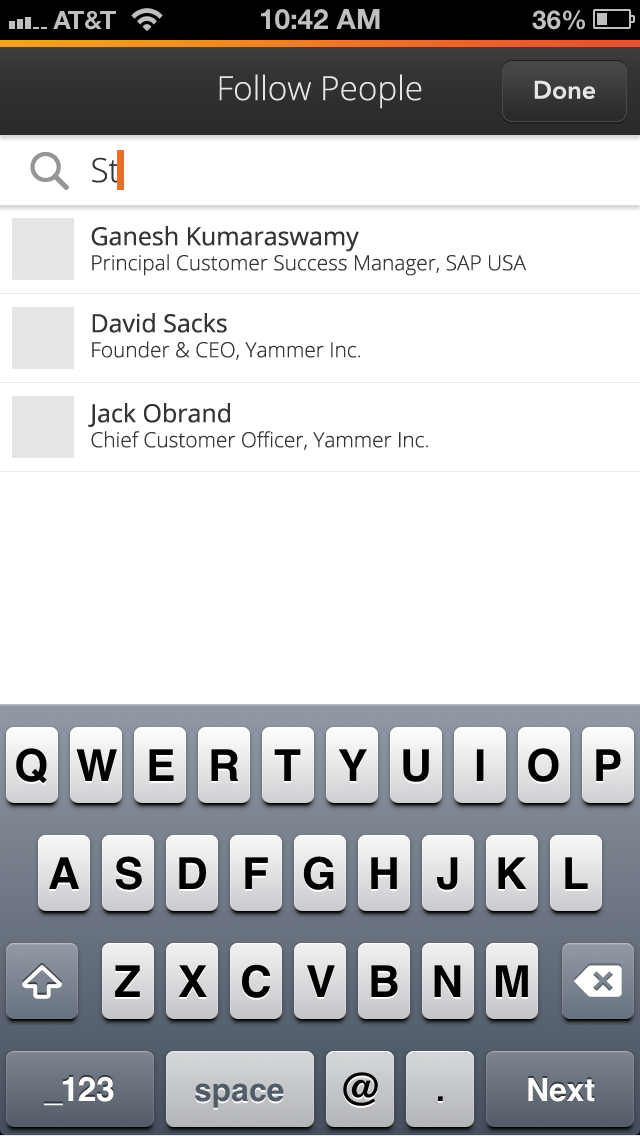
<style>
.page{position:relative;width:640px;height:1136px;background:#ffffff}
.page>*{position:absolute;margin:0}
.t1{font:33.3px "OpenSans-Light";color:#e5e5e5}
.t2{font:25px "AvenirNext-DemiBold";color:#e5e5e5}
.t3{font:33.3px "OpenSans-Light";color:#343434}
.t4{font:20.8px "OpenSans-Light";color:#343434}
.t5{font:25px "OpenSans";color:#343434}
</style>
<div class="page">
<p class="t1" style="left:219px;top:74px;width:203px;height:35px">Follow People</p>
<p class="t2" style="left:534px;top:80px;width:61px;height:19px">Done</p>
<p class="t3" style="left:92px;top:157px;width:27px;height:26px">St</p>
<p class="t4" style="left:91px;top:226px;width:435px;height:50px"><span class="t5">Ganesh Kumaraswamy<br></span>Principal Customer Success Manager, SAP USA</p>
<p class="t4" style="left:92px;top:313px;width:268px;height:47px"><span class="t5">David Sacks<br></span>Founder &amp; CEO, Yammer Inc.</p>
<p class="t4" style="left:88px;top:403px;width:340px;height:47px"><span class="t5">Jack Obrand<br></span>Chief Customer Officer, Yammer Inc.</p>
</div>
